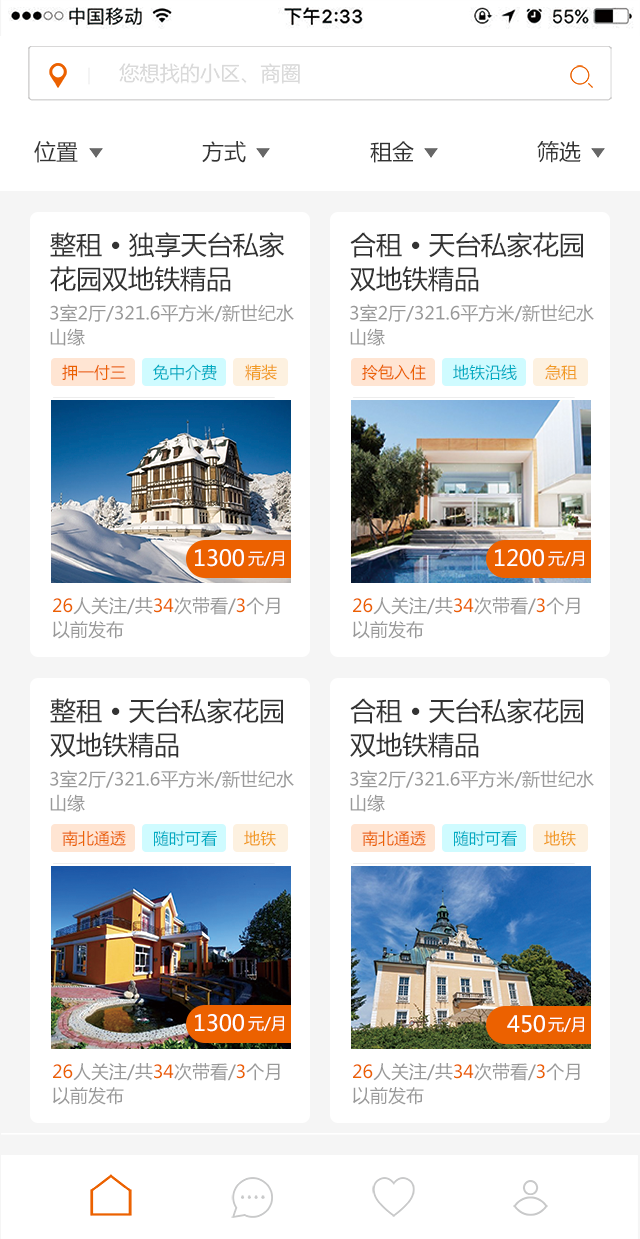
<style>
.page{position:relative;width:640px;height:1239px;background:#ffffff}
.page>*{position:absolute;margin:0}
.t1{font:22px "MicrosoftYaHei";color:#333333}
.t2{font:26px/34px "MicrosoftYaHei";color:#333333}
.t3{font:18px/24px "MicrosoftYaHei";color:#999999}
.t4{font:16px "MicrosoftYaHei";color:#eb6100}
.t5{font:16px "MicrosoftYaHei";color:#00acc3}
.t6{font:16px "MicrosoftYaHei";color:#f19a21}
.t7{font:22px "MicrosoftYaHei";color:#ffffff}
.t8{font:16px "MicrosoftYaHei";color:#ffffff}
.t9{font:18px/24px "MicrosoftYaHei";color:#eb6100}
.t10{font:18px/24px "MicrosoftYaHei";color:#eb6000}
.t11{font:18px/24px "MicrosoftYaHei";color:#ec6100}
</style>
<div class="page">
<p class="t1" style="left:34px;top:141px;width:44px;height:22px">位置</p>
<p class="t1" style="left:202px;top:141px;width:44px;height:22px">方式</p>
<p class="t1" style="left:370px;top:141px;width:44px;height:22px">租金</p>
<p class="t1" style="left:537px;top:141px;width:44px;height:22px">筛选</p>
<p class="t2" style="left:50px;top:232px;width:235px;height:60px">整租 • 独享天台私家<br>花园双地铁精品</p>
<p class="t2" style="left:350px;top:232px;width:233px;height:60px">合租 • 天台私家花园<br>双地铁精品</p>
<p class="t3" style="left:50px;top:304px;width:244px;height:42px">3室2厅/321.6平方米/新世纪水<br>山缘</p>
<p class="t3" style="left:350px;top:304px;width:244px;height:42px">3室2厅/321.6平方米/新世纪水<br>山缘</p>
<p class="t4" style="left:62px;top:364px;width:64px;height:17px">押一付三</p>
<p class="t5" style="left:153px;top:364px;width:64px;height:17px">免中介费</p>
<p class="t6" style="left:245px;top:364px;width:32px;height:17px">精装</p>
<p class="t4" style="left:362px;top:364px;width:64px;height:17px">拎包入住</p>
<p class="t5" style="left:453px;top:364px;width:64px;height:17px">地铁沿线</p>
<p class="t6" style="left:545px;top:364px;width:32px;height:16px">急租</p>
<p class="t7" style="left:195px;top:549px;width:49px;height:18px">1300</p>
<p class="t8" style="left:248px;top:551px;width:36px;height:16px">元/月</p>
<p class="t7" style="left:495px;top:549px;width:49px;height:18px">1200</p>
<p class="t8" style="left:548px;top:551px;width:36px;height:16px">元/月</p>
<p class="t3" style="left:53px;top:597px;width:227px;height:42px"><span class="t9">26</span>人关注/共<span class="t10">34</span>次带看/<span class="t11">3</span>个月<br>以前发布</p>
<p class="t3" style="left:353px;top:597px;width:227px;height:42px"><span class="t9">26</span>人关注/共<span class="t10">34</span>次带看/<span class="t11">3</span>个月<br>以前发布</p>
<p class="t2" style="left:50px;top:698px;width:233px;height:60px">整租 • 天台私家花园<br>双地铁精品</p>
<p class="t2" style="left:350px;top:698px;width:233px;height:60px">合租 • 天台私家花园<br>双地铁精品</p>
<p class="t3" style="left:50px;top:770px;width:244px;height:42px">3室2厅/321.6平方米/新世纪水<br>山缘</p>
<p class="t3" style="left:350px;top:770px;width:244px;height:42px">3室2厅/321.6平方米/新世纪水<br>山缘</p>
<p class="t4" style="left:62px;top:830px;width:64px;height:16px">南北通透</p>
<p class="t5" style="left:154px;top:830px;width:63px;height:17px">随时可看</p>
<p class="t6" style="left:244px;top:830px;width:32px;height:17px">地铁</p>
<p class="t4" style="left:362px;top:830px;width:64px;height:16px">南北通透</p>
<p class="t5" style="left:454px;top:830px;width:63px;height:17px">随时可看</p>
<p class="t6" style="left:544px;top:830px;width:32px;height:17px">地铁</p>
<p class="t7" style="left:195px;top:1014px;width:49px;height:18px">1300</p>
<p class="t8" style="left:248px;top:1016px;width:36px;height:16px">元/月</p>
<p class="t7" style="left:507px;top:1015px;width:38px;height:18px">450</p>
<p class="t8" style="left:548px;top:1017px;width:36px;height:16px">元/月</p>
<p class="t3" style="left:53px;top:1063px;width:227px;height:42px"><span class="t9">26</span>人关注/共<span class="t10">34</span>次带看/<span class="t11">3</span>个月<br>以前发布</p>
<p class="t3" style="left:353px;top:1063px;width:227px;height:42px"><span class="t9">26</span>人关注/共<span class="t10">34</span>次带看/<span class="t11">3</span>个月<br>以前发布</p>
</div>
